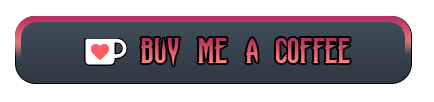
<style>
.page{position:relative;width:434px;height:102px;background:#ffffff}
.page>*{position:absolute;margin:0}
.t1{font:36px "HauntingAttraction"}
</style>
<div class="page">
<p class="t1" style="left:141px;top:38px;width:209px;height:28px">Buy me a coffee</p>
</div>
